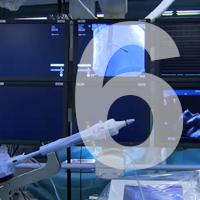
<style>
.page{position:relative;width:200px;height:200px}
.page>*{position:absolute;margin:0}
.t1{font:208.3px "PostGrotesk-Bold"}
</style>
<div class="page">
<p class="t1" style="left:75px;top:21px;width:109px;height:149px">6</p>
</div>
